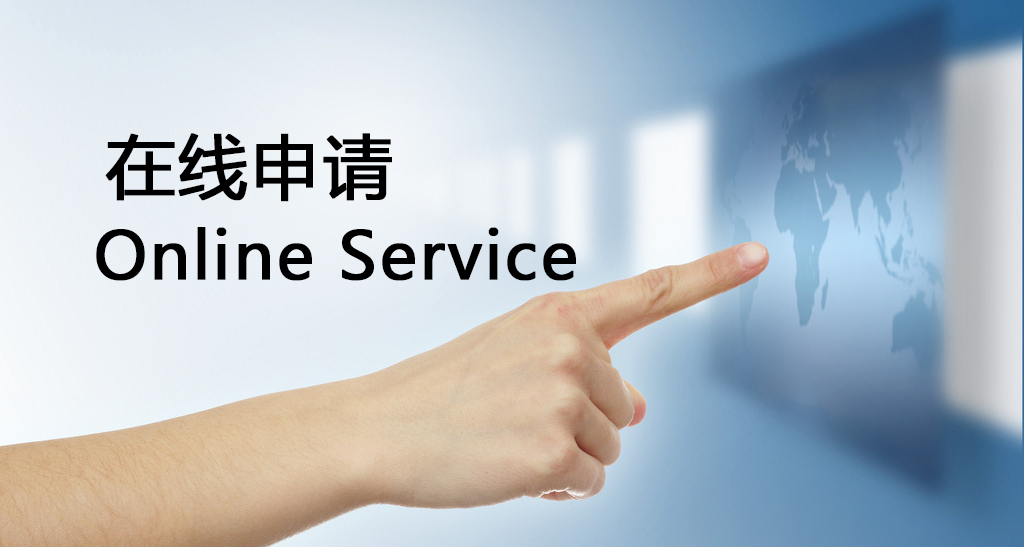
<style>
.page{position:relative;width:1024px;height:547px}
.page>*{position:absolute;margin:0}
.t1{font:69px "MicrosoftYaHei";letter-spacing:0.02em;color:#000000;font-weight:bold}
.t2{font:65px "MicrosoftYaHei";letter-spacing:0.02em;color:#000000;font-weight:bold}
</style>
<div class="page">
<p class="t1" style="left:105px;top:133px;width:287px;height:69px">在线申请</p>
<p class="t2" style="left:96px;top:227px;width:480px;height:54px">Online Service</p>
</div>
